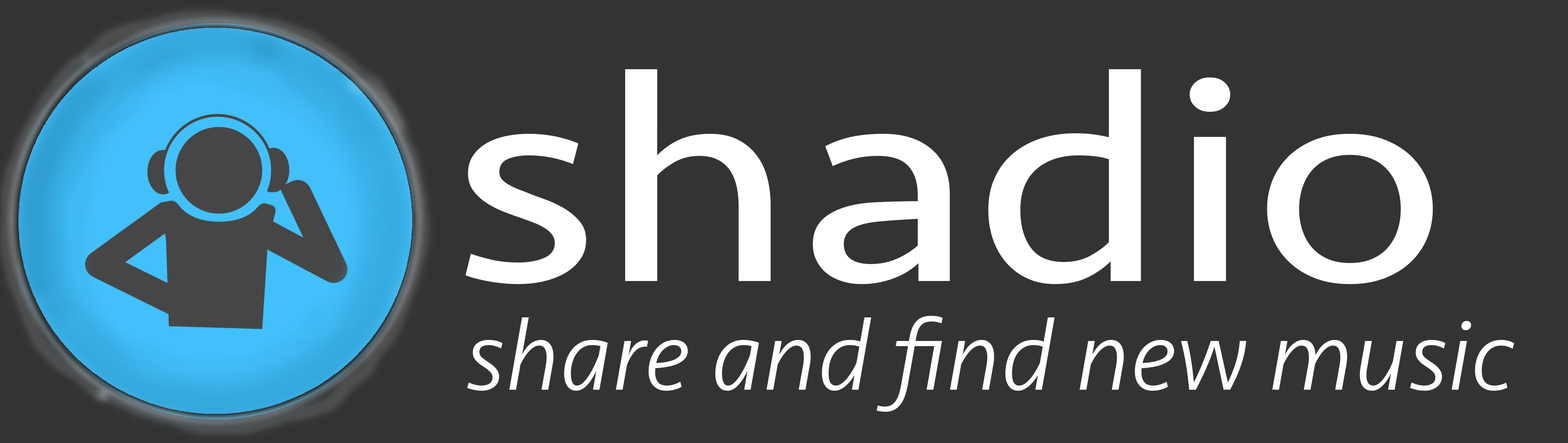
<style>
.page{position:relative;width:1568px;height:443px;background:#333333}
.page>*{position:absolute;margin:0}
.t1{font:299.5px "Seravek";color:#ffffff;scale:1.19 1}
.t2{font:102.5px "Seravek-LightItalic";color:#ffffff}
</style>
<div class="page">
<p class="t1" style="left:465px;top:69px;width:968px;height:215px">shadio</p>
<p class="t2" style="left:467px;top:316px;width:1047px;height:95px">share and find new music</p>
</div>
